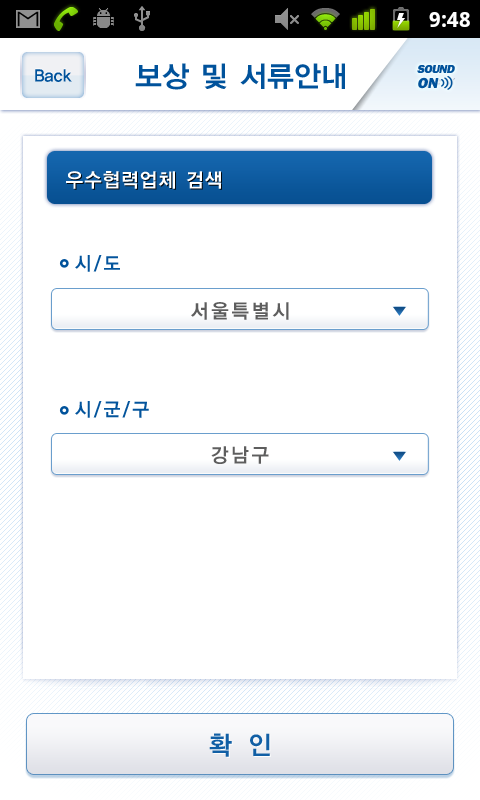
<style>
.page{position:relative;width:480px;height:800px;background:#ffffff}
.page>*{position:absolute;margin:0}
.t1{font:29px "YDIYGO140-KSCpc-EUC-H";letter-spacing:-0.075em;color:#00529b}
.t2{font:12px/15px "FranklinGothic-Heavy";letter-spacing:-0.05em;color:#00529b;text-transform:uppercase;font-style:italic}
.t3{font:13px/15px "FranklinGothic-Heavy";color:#00529b;text-transform:uppercase;font-style:italic}
.t4{font:15px/15px "FranklinGothic-Heavy";color:#00529b;text-transform:uppercase;font-style:italic}
.t5{font:18px "YDIYGO140-KSCpc-EUC-H";letter-spacing:-0.075em;color:#00529b;scale:0.95 1}
.t6{font:20px "YDIYGO140-KSCpc-EUC-H";letter-spacing:-0.025em;color:#ffffff;scale:0.95 1}
.t7{font:19px "YDIYGO140-KSCpc-EUC-H";letter-spacing:0.05em;color:#00529b;scale:0.95 1}
.t8{font:20px "YDIYGO140-KSCpc-EUC-H";letter-spacing:0.075em;color:#5c5c5c;scale:0.95 1}
.t9{font:26px "YDIYGO140-KSCpc-EUC-H";letter-spacing:0.05em;color:#115fa5;scale:0.95 1}
</style>
<div class="page">
<p class="t1" style="left:135px;top:63px;width:210px;height:27px">보상 및 서류안내</p>
<p class="t2" style="left:417px;top:65px;width:38px;height:24px">sound<br><span class="t3">oFF</span></p>
<p class="t2" style="left:417px;top:65px;width:38px;height:24px">sound<br><span class="t4">on</span></p>
<p class="t5" style="left:35px;top:69px;width:37px;height:13px">Back</p>
<p class="t6" style="left:66px;top:171px;width:155px;height:18px">우수협력업체 검색</p>
<p class="t7" style="left:75px;top:255px;width:45px;height:17px">시/도</p>
<p class="t8" style="left:191px;top:302px;width:98px;height:18px">서울특별시</p>
<p class="t7" style="left:75px;top:401px;width:74px;height:17px">시/군/구</p>
<p class="t8" style="left:211px;top:446px;width:58px;height:18px">강남구</p>
<p class="t9" style="left:209px;top:733px;width:61px;height:24px">확 인</p>
</div>
